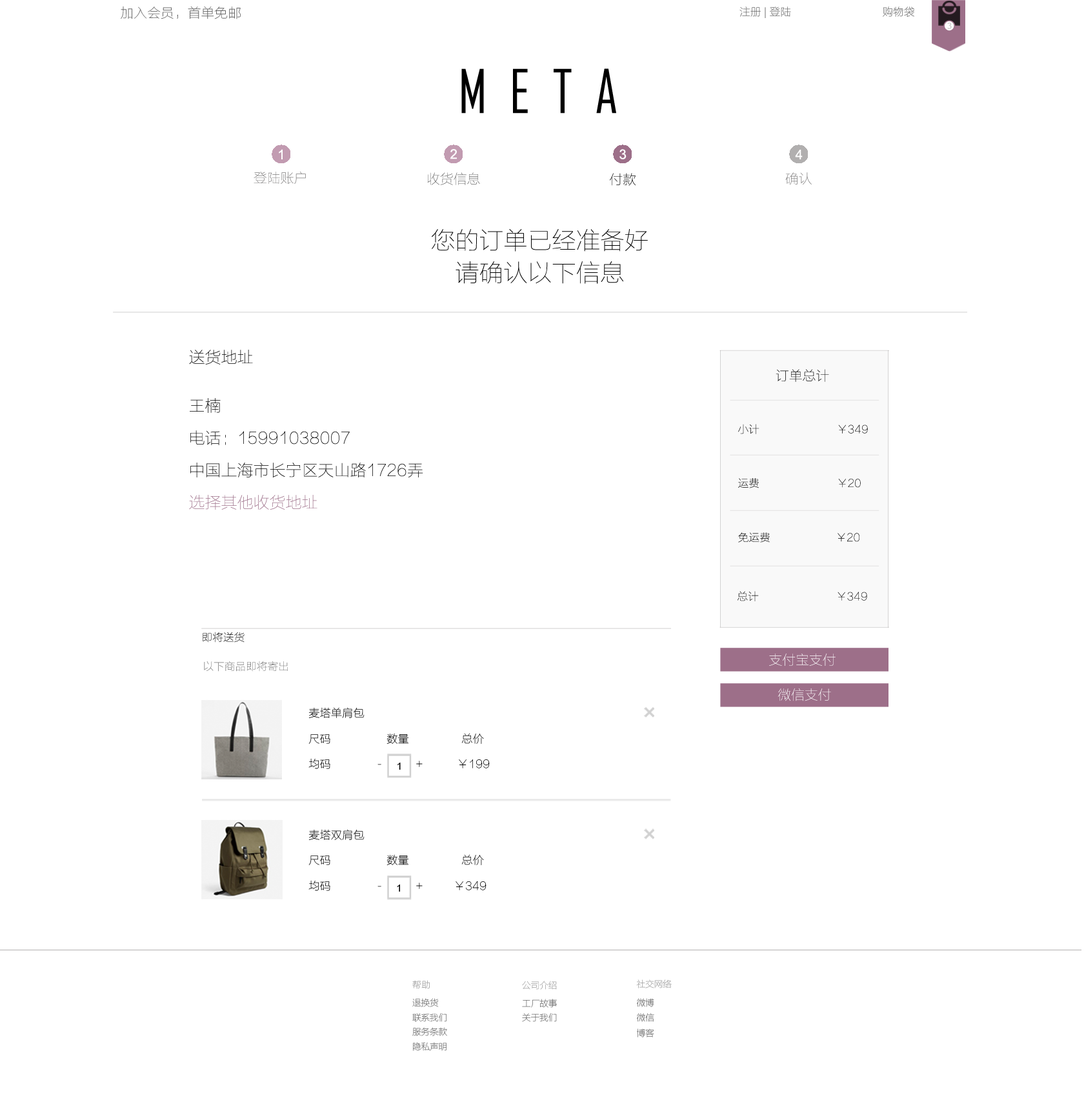
<style>
.page{position:relative;width:1084px;height:1100px;background:#ffffff}
.page>*{position:absolute;margin:0}
.t1{font:13.4px "FZLTCXHJW--GB1-0";color:#666666}
.t2{font:10.8px "FZLTCXHJW--GB1-0";color:#666666}
.t3{font:10.9px "ArialMT";color:#666666}
.t4{font:8.1px "Arial-BoldMT";color:#d1d1d1}
.t5{font:57.5px "AgencyFB-Reg";color:#000000}
.t6{font:13.4px "ArialMT";color:#ffffff}
.t7{font:13.4px "FZLTCXHJW--GB1-0";color:#7c7a7a}
.t8{font:13.4px "FZLTCXHJW--GB1-0"}
.t9{font:24.2px/16.1px "FZLTCXHJW--GB1-0";color:#000000}
.t10{font:16.1px/16.1px "FZLTCXHJW--GB1-0";color:#000000}
.t11{font:16.1px/16.1px "FZLTCXHJW--GB1-0";color:#9d6f89}
.t12{font:13.4px "FZLTCXHJW--GB1-0";color:#0f0f0f}
.t13{font:10.8px "FZLTCXHJW--GB1-0";color:#0f0f0f}
.t14{font:10.8px "FZLTCXHJW--GB1-0"}
.t15{font:10.8px "FZLTCXHJW--GB1-0";color:#000000}
.t16{font:13.4px "FZLTCXHJW--GB1-0";color:#ffffff}
.t17{font:10.8px "FZLTCXHJW--GB1-0";color:#706f6f}
.t18{font:11.2px/25.5px "FZLTCXHJW--GB1-0";color:#000000}
.t19{font:9.6px "ArialMT";color:#000000}
.t20{font:9.1px/14.6px "FZLTCXHJW--GB1-0";letter-spacing:-0.04em;color:#666666}
.t21{font:9.1px/18.2px "FZLTCXHJW--GB1-0";letter-spacing:0.03em;color:#999999}
.t22{font:9.1px/18.2px "FZLTCXHJW--GB1-0";letter-spacing:-0.04em;color:#999999}
</style>
<div class="page">
<p class="t1" style="left:121px;top:6px;width:120px;height:13px">加入会员，首单免邮</p>
<p class="t2" style="left:739px;top:6px;width:175px;height:12px"><span class="t3"> </span>注册 | 登陆                           购物袋</p>
<p class="t4" style="left:947px;top:23px;width:5px;height:6px">3</p>
<p class="t5" style="left:461px;top:68px;width:155px;height:46px">M  E  T  A</p>
<p class="t6" style="left:279px;top:149px;width:4px;height:10px">1</p>
<p class="t6" style="left:450px;top:149px;width:7px;height:10px">2</p>
<p class="t6" style="left:619px;top:149px;width:7px;height:10px">3</p>
<p class="t6" style="left:795px;top:150px;width:8px;height:9px">4</p>
<p class="t7" style="left:254px;top:172px;width:52px;height:12px">登陆账户</p>
<p class="t1" style="left:427px;top:172px;width:53px;height:13px">收货信息</p>
<p class="t8" style="left:610px;top:173px;width:26px;height:13px">付款</p>
<p class="t7" style="left:785px;top:172px;width:27px;height:13px">确认</p>
<p class="t9" style="left:432px;top:229px;width:216px;height:55px;text-align:center">您的订单已经准备好<br><br>请确认以下信息</p>
<p class="t10" style="left:189px;top:350px;width:234px;height:160px">送货地址<br><br><br>王楠<br><br>电话：15991038007<br><br>中国上海市长宁区天山路1726弄<br><br><span class="t11">选择其他收货地址</span></p>
<p class="t12" style="left:776px;top:369px;width:53px;height:13px">订单总计</p>
<p class="t13" style="left:738px;top:424px;width:130px;height:10px">小计                          ￥349</p>
<p class="t14" style="left:738px;top:478px;width:123px;height:10px">运费                          ￥20</p>
<p class="t13" style="left:738px;top:532px;width:121px;height:11px">免运费                      ￥20</p>
<p class="t15" style="left:737px;top:591px;width:130px;height:10px">总计                          ￥349</p>
<p class="t13" style="left:203px;top:632px;width:42px;height:11px">即将送货</p>
<p class="t16" style="left:769px;top:654px;width:67px;height:12px">支付宝支付</p>
<p class="t17" style="left:204px;top:661px;width:84px;height:11px">以下商品即将寄出</p>
<p class="t16" style="left:777px;top:688px;width:54px;height:13px">微信支付</p>
<p class="t18" style="left:308px;top:707px;width:182px;height:62px">麦塔单肩包<br>尺码                  数量                 总价<br>均码               -           +           ￥199</p>
<p class="t19" style="left:397px;top:763px;width:4px;height:7px">1</p>
<p class="t18" style="left:308px;top:829px;width:178px;height:62px">麦塔双肩包<br>尺码                  数量                 总价<br>均码               -           +          ￥349</p>
<p class="t19" style="left:397px;top:885px;width:3px;height:7px">1</p>
<p class="t20" style="left:412px;top:980px;width:35px;height:71px"><span class="t21">帮助<br></span>退换货<br>联系我们<br>服务条款<br>隐私声明</p>
<p class="t20" style="left:522px;top:981px;width:35px;height:41px"><span class="t22">公司介绍<br></span>工厂故事<br>关于我们</p>
</div>
